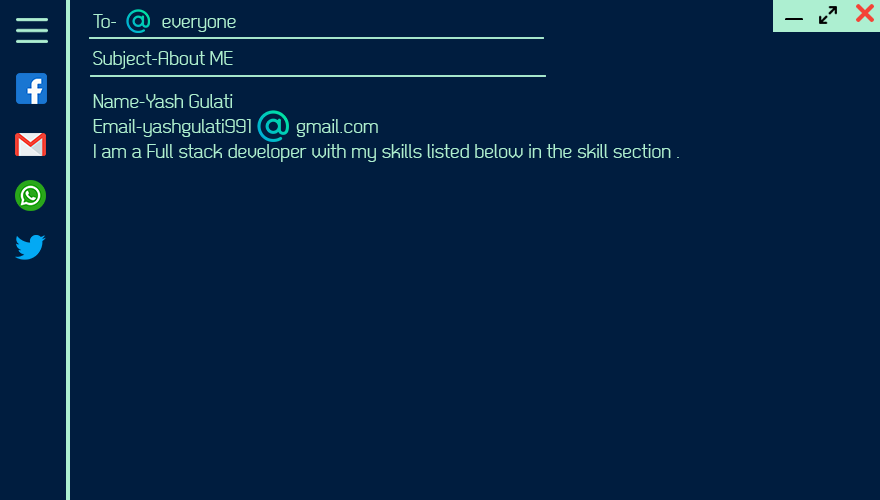
<style>
.page{position:relative;width:880px;height:500px;background:#001d3f}
.page>*{position:absolute;margin:0}
.t1{font:20.8px "Dekar-Regular";color:#adefd1}
</style>
<div class="page">
<p class="t1" style="left:93px;top:14px;width:143px;height:18px">To-         everyone</p>
<p class="t1" style="left:93px;top:51px;width:140px;height:18px">Subject-About ME</p>
<p class="t1" style="left:93px;top:94px;width:586px;height:68px">Name-Yash Gulati<br>Email-yashgulati991         gmail.com<br>I am a Full stack developer with my skills listed below in the skill section .</p>
</div>
